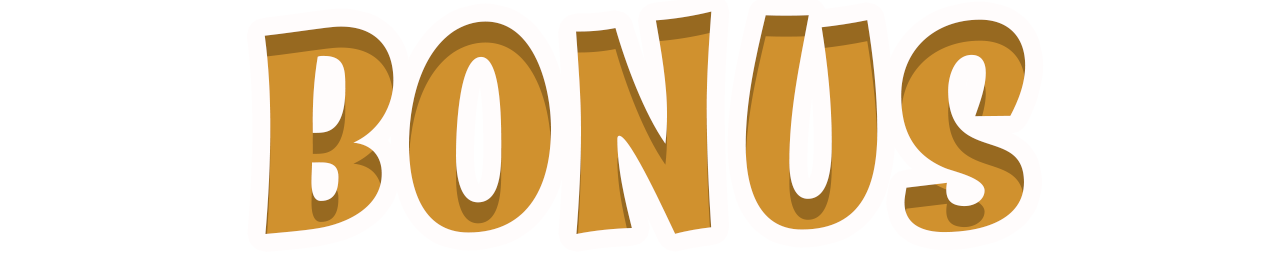
<style>
.page{position:relative;width:1286px;height:260px;background:#ffffff}
.page>*{position:absolute;margin:0}
.t1{font:281.2px "Catseye-Bold";color:#d0912e}
</style>
<div class="page">
<p class="t1" style="left:264px;top:11px;width:762px;height:223px">BONUS</p>
</div>
